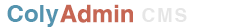
<style>
.page{position:relative;width:225px;height:28px;background:#ffffff}
.page>*{position:absolute;margin:0}
.t1{font:24px "CTCuHeiSJ";color:#5494af}
.t2{font:24px "CTCuHeiSJ";color:#c66653}
.t3{font:19px "CTCuHeiSJ";letter-spacing:0.2em;color:#d1d1d1}
</style>
<div class="page">
<p class="t1" style="left:7px;top:5px;width:52px;height:22px">Coly</p>
<p class="t2" style="left:60px;top:4px;width:73px;height:19px">Admin</p>
<p class="t3" style="left:142px;top:8px;width:45px;height:14px;opacity:0.55">CMS</p>
</div>
